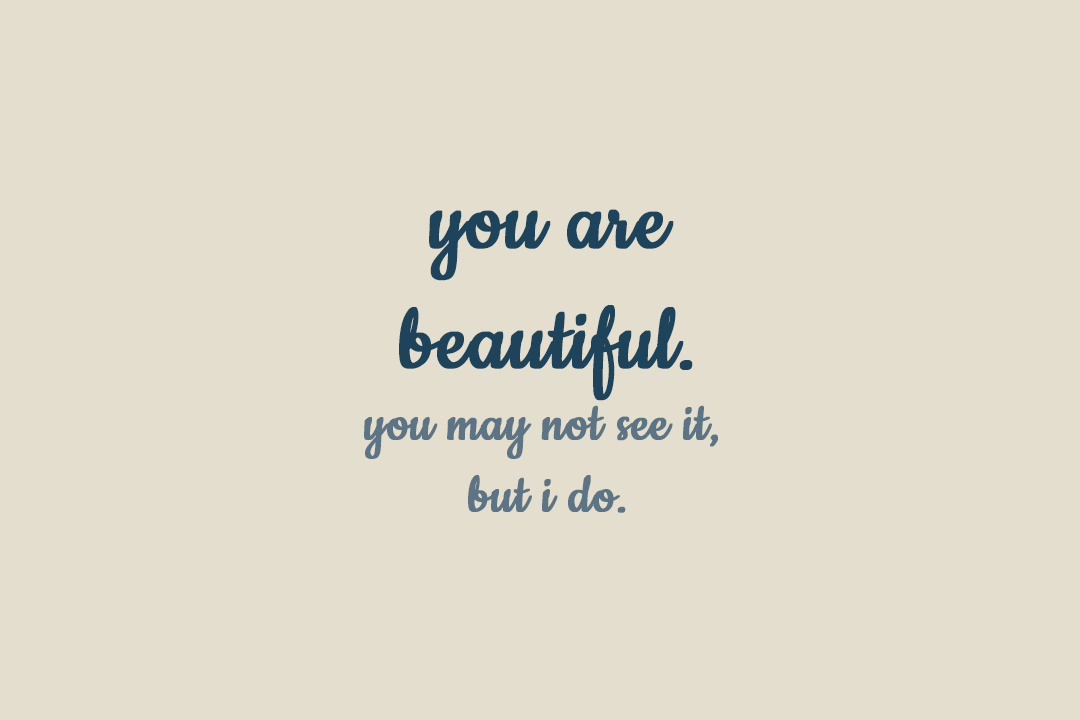
<style>
.page{position:relative;width:1080px;height:720px;background:#e3decd}
.page>*{position:absolute;margin:0}
.t1{font:60px "Cookie-Regular";color:#5c7483;font-weight:bold}
.t2{font:100px "Cookie-Regular";color:#1e445b;font-weight:bold}
</style>
<div class="page">
<p class="t1" style="left:364px;top:209px;width:354px;height:304px;text-align:center"><span class="t2">you are<br>beautiful.<br></span>you may not see it, <br>but i do.</p>
</div>
